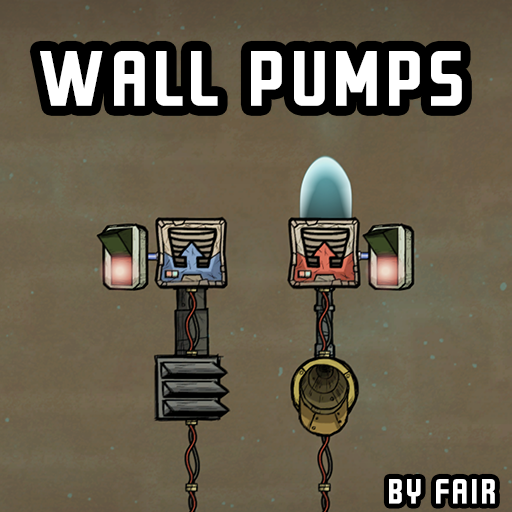
<style>
.page{position:relative;width:512px;height:512px}
.page>*{position:absolute;margin:0}
.t1{font:61.9px "GRAYSTROKE";letter-spacing:0.05em;color:#ffffff;font-weight:bold}
.t2{font:27.2px "GRAYSTROKE";letter-spacing:0.05em;color:#ffffff;font-weight:bold}
</style>
<div class="page">
<p class="t1" style="left:40px;top:51px;width:422px;height:55px">WALL PUMPS</p>
<p class="t2" style="left:389px;top:479px;width:106px;height:25px">BY FAIR</p>
</div>
